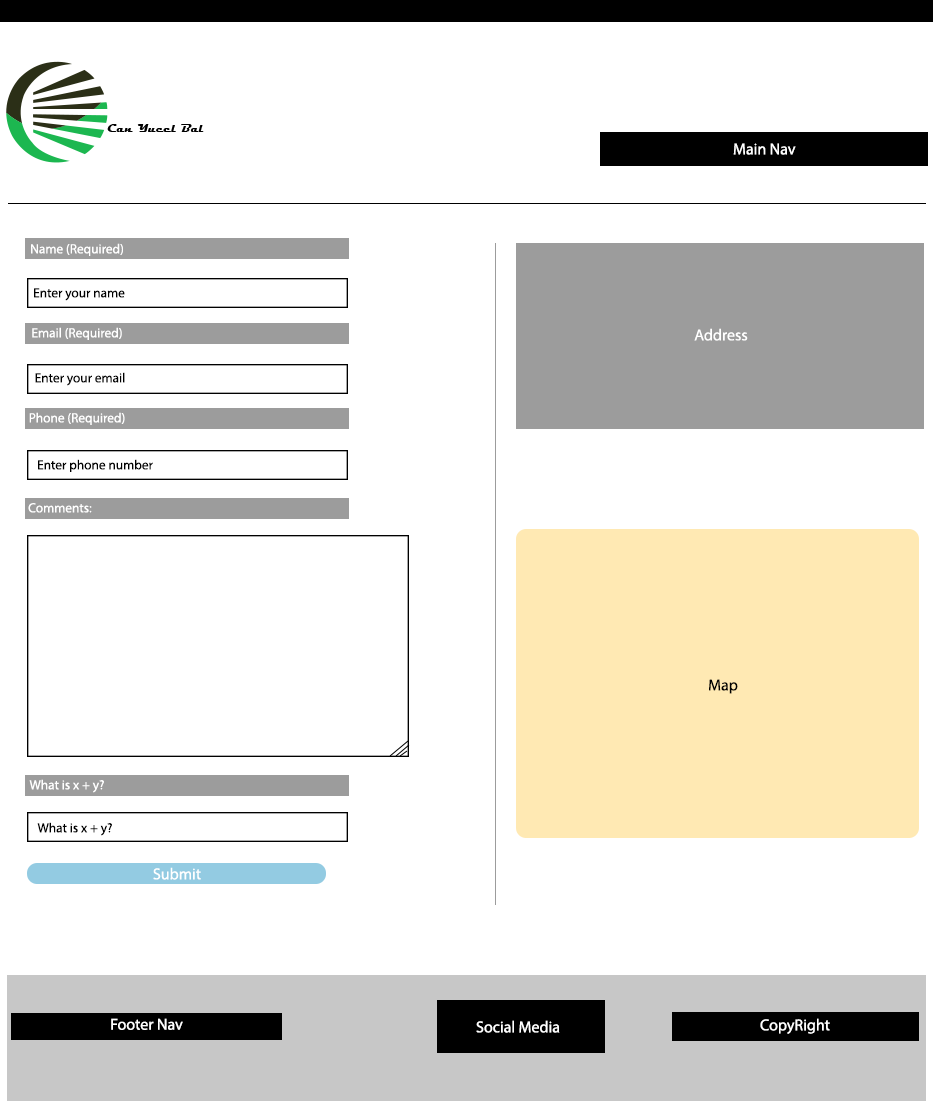
<style>
.page{position:relative;width:934px;height:1105px;background:#ffffff}
.page>*{position:absolute;margin:0}
.t1{font:12px "MyriadPro-Regular";color:#ffffff}
.t2{font:13.3px "MyriadPro-Regular";color:#ffffff}
.t3{font:13.3px "MyriadPro-Regular";color:#000000}
.t4{font:12px "MyriadPro-Regular";color:#000000}
</style>
<div class="page">
<p class="t1" style="left:733px;top:143px;width:63px;height:12px">Main Nav</p>
<p class="t2" style="left:31px;top:243px;width:92px;height:13px">Name (Required)</p>
<p class="t3" style="left:34px;top:288px;width:91px;height:13px">Enter your name</p>
<p class="t2" style="left:32px;top:327px;width:90px;height:13px">Email (Required)</p>
<p class="t1" style="left:694px;top:328px;width:54px;height:13px">Address</p>
<p class="t3" style="left:35px;top:372px;width:90px;height:14px">Enter your email</p>
<p class="t2" style="left:29px;top:412px;width:96px;height:13px">Phone (Required)</p>
<p class="t3" style="left:38px;top:459px;width:115px;height:13px">Enter phone number</p>
<p class="t2" style="left:28px;top:503px;width:64px;height:10px">Comments:</p>
<p class="t4" style="left:709px;top:679px;width:29px;height:15px">Map</p>
<p class="t2" style="left:29px;top:779px;width:75px;height:14px">What is x + y?</p>
<p class="t3" style="left:37px;top:822px;width:75px;height:14px">What is x + y?</p>
<p class="t1" style="left:153px;top:867px;width:48px;height:13px">Submit</p>
<p class="t1" style="left:111px;top:1018px;width:72px;height:12px">Footer Nav</p>
<p class="t1" style="left:476px;top:1020px;width:84px;height:13px">Social Media</p>
<p class="t1" style="left:760px;top:1018px;width:70px;height:16px">CopyRight</p>
</div>
